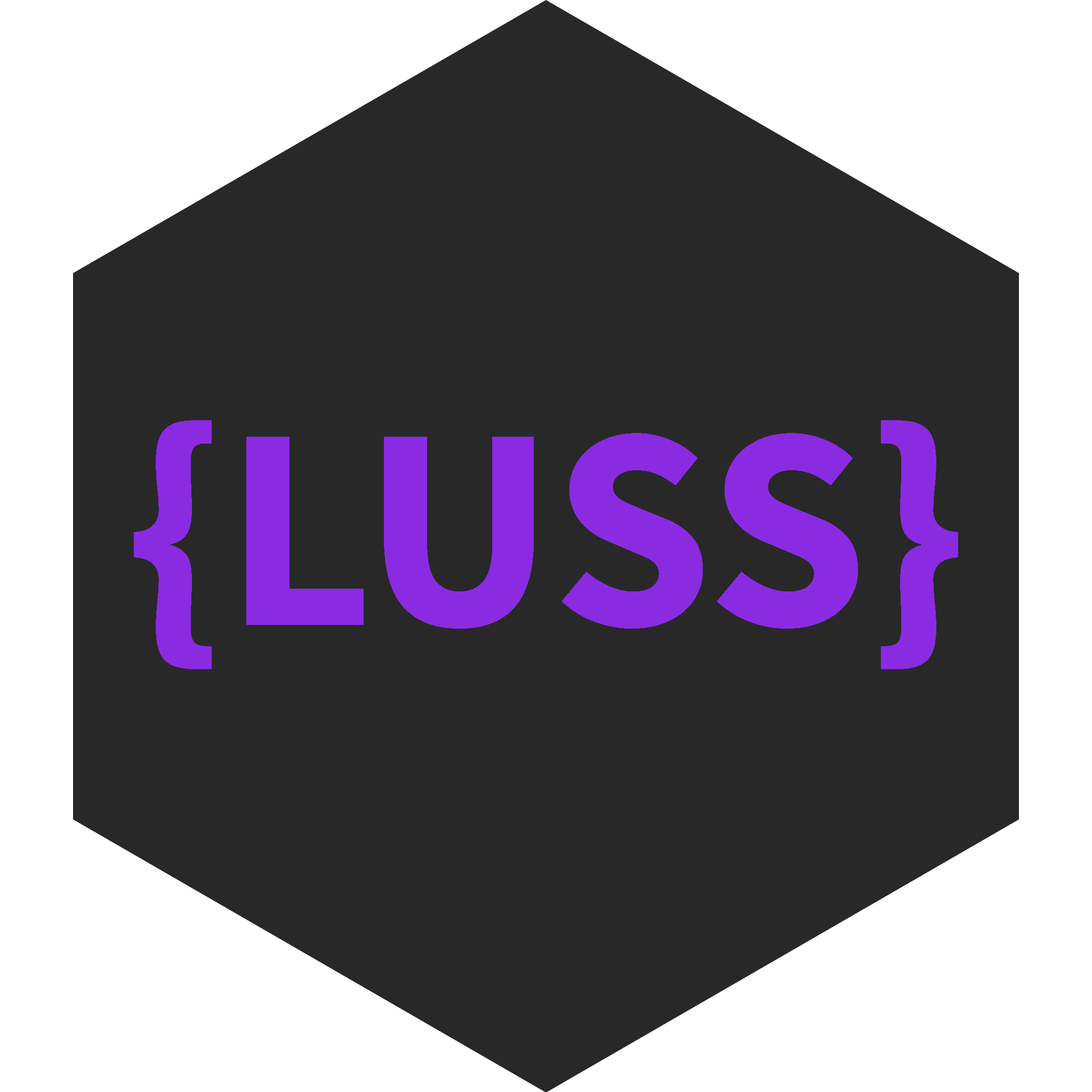
<style>
.page{position:relative;width:1092px;height:1092px;background:#282828}
.page>*{position:absolute;margin:0}
.t1{font:288.4px "SourceSansPro-Bold";color:#8a2be2}
</style>
<div class="page">
<p class="t1" style="left:134px;top:420px;width:824px;height:249px">{LUSS}</p>
</div>
